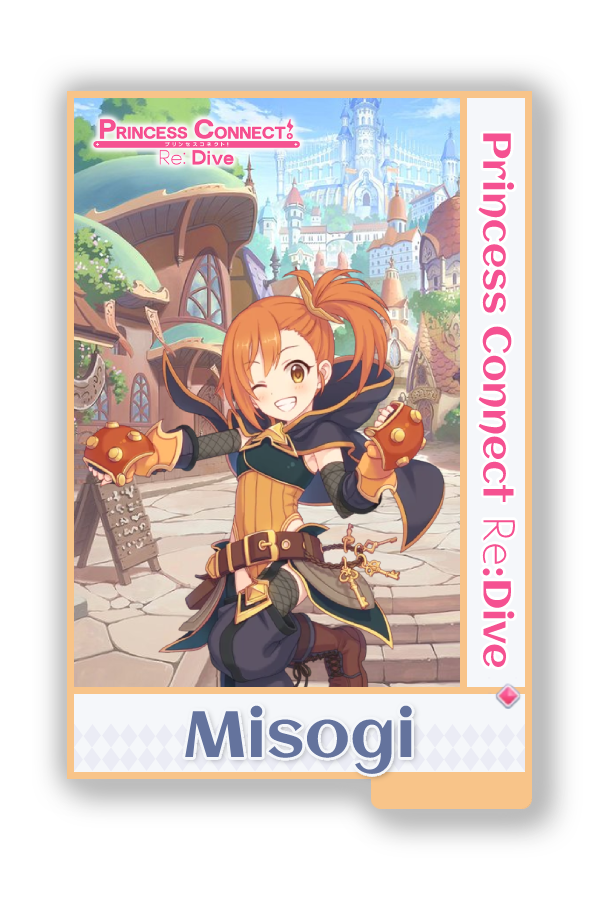
<style>
.page{position:relative;width:600px;height:900px;background:#ffffff}
.page>*{position:absolute;margin:0}
.t1{font:39px "Aclonica-Regular";color:#f55191}
.t2{font:39px "AaarghNormal";color:#f55191}
.t3{font:65px "Aclonica-Regular";color:#64739d}
</style>
<div class="page">
<p class="t1" style="left:478px;top:133px;width:38px;height:534px;rotate:90deg">Princess Connect <span class="t2">Re</span>:Dive</p>
<p class="t3" style="left:185px;top:705px;width:227px;height:69px">Misogi</p>
</div>
